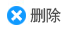
<style>
.page{position:relative;width:67px;height:30px;background:#ffffff}
.page>*{position:absolute;margin:0}
.t1{font:16px "SimHei";letter-spacing:-0.05em;color:#4a4a4a}
</style>
<div class="page">
<p class="t1" style="left:30px;top:7px;width:31px;height:16px">删除</p>
</div>
